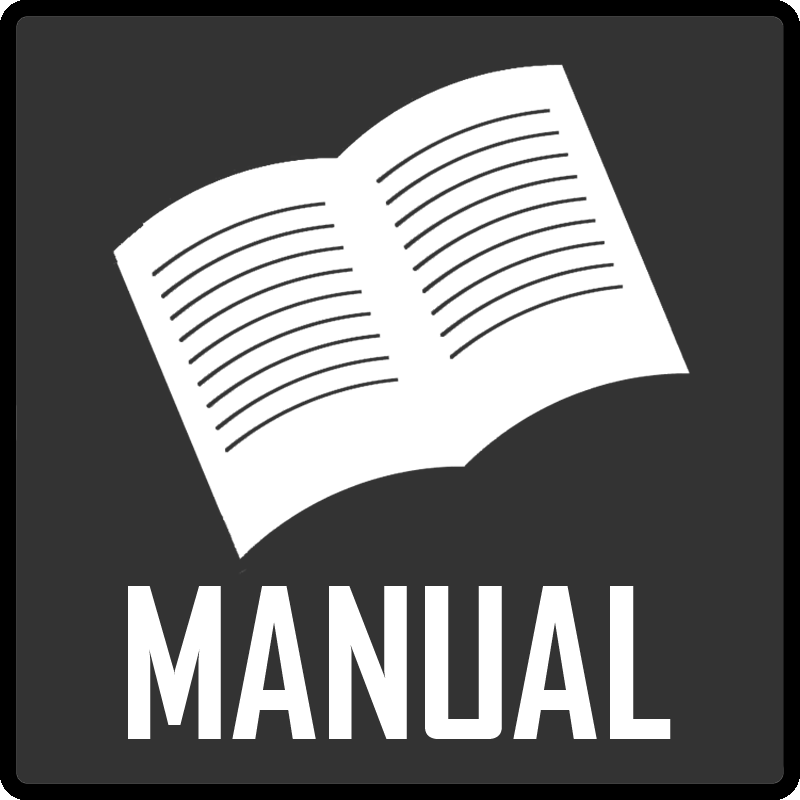
<style>
.page{position:relative;width:800px;height:800px;background:#333333}
.page>*{position:absolute;margin:0}
.t1{font:200px "AgencyFB-Bold";color:#ffffff}
</style>
<div class="page">
<p class="t1" style="left:128px;top:586px;width:543px;height:153px">MANUAL</p>
</div>
